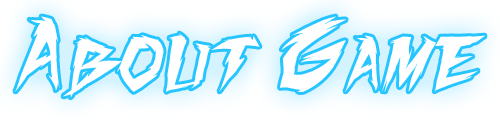
<style>
.page{position:relative;width:500px;height:120px;background:#ffffff}
.page>*{position:absolute;margin:0}
.t1{font:83.3px "FightingSpiritTBS";color:#ffffff}
</style>
<div class="page">
<p class="t1" style="left:15px;top:16px;width:470px;height:82px">About Game</p>
</div>
